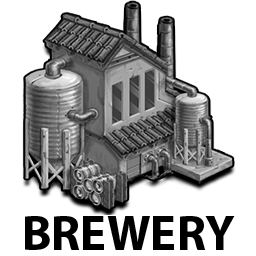
<style>
.page{position:relative;width:256px;height:256px;background:#ffffff}
.page>*{position:absolute;margin:0}
.t1{font:49px "MyriadPro-Bold";color:#000000}
</style>
<div class="page">
<p class="t1" style="left:25px;top:216px;width:210px;height:34px">BREWERY</p>
</div>
